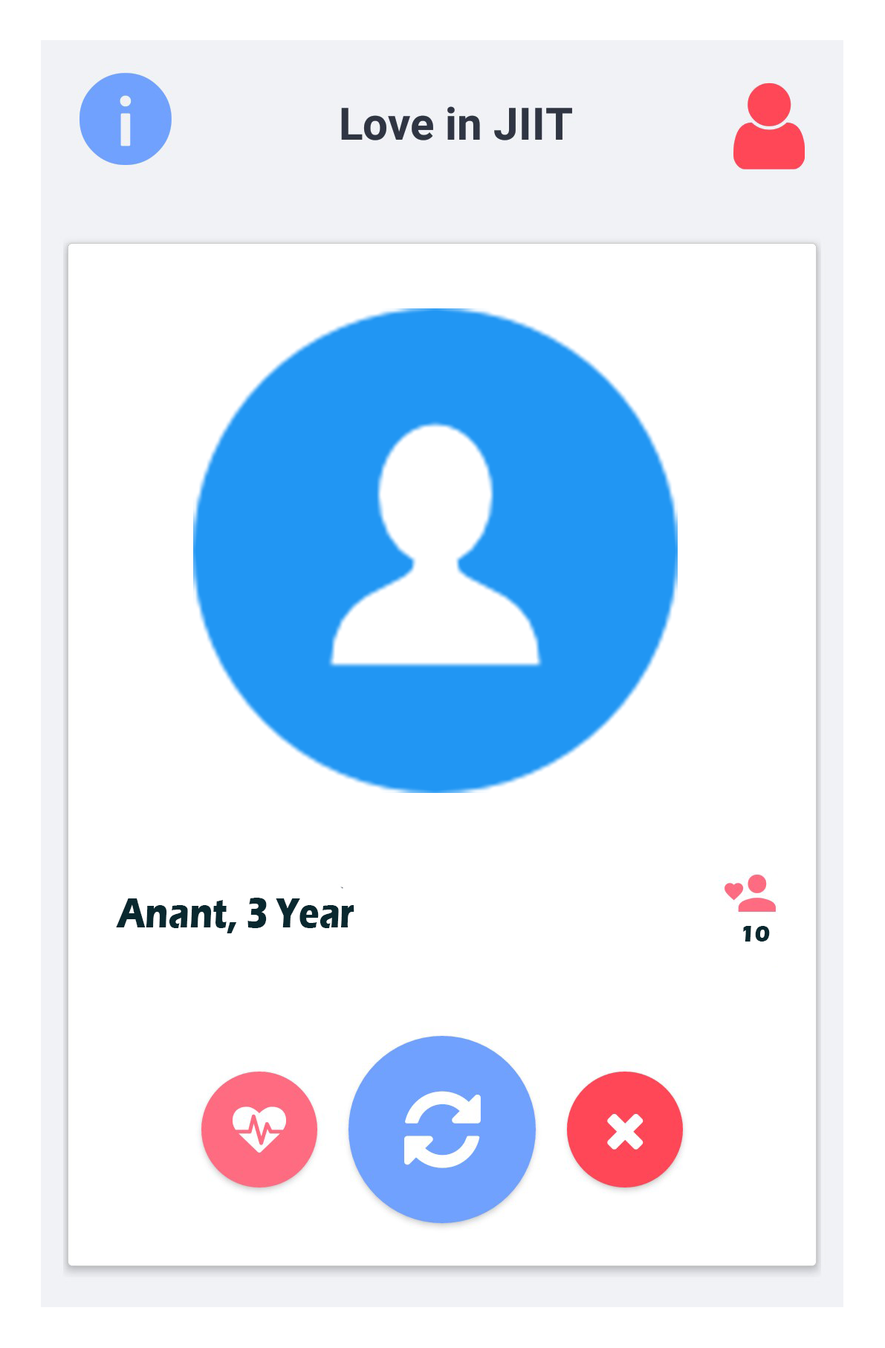
<style>
.page{position:relative;width:885px;height:1348px;background:#ffffff}
.page>*{position:absolute;margin:0}
.t1{font:43.9px "ErasITC-Bold";color:#09282f;scale:0.78 1}
.t2{font:23.4px "ErasITC-Bold";color:#09282f}
</style>
<div class="page">
<p class="t1" style="left:116px;top:897px;width:238px;height:36px">Anant, 3 Year</p>
<p class="t2" style="left:743px;top:926px;width:27px;height:15px">10</p>
</div>
